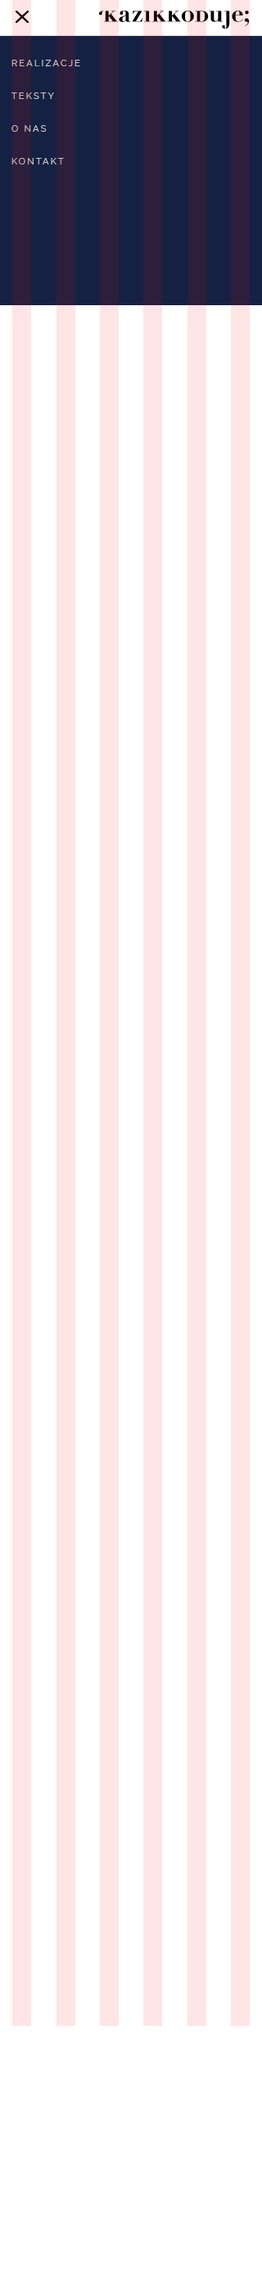
<style>
.page{position:relative;width:262px;height:2291px;background:#ffffff}
.page>*{position:absolute;margin:0}
.t1{font:9px/32.7px "Raleway-Regular";letter-spacing:0.2em;color:#cccccc}
</style>
<div class="page">
<p class="t1" style="left:11px;top:60px;width:69px;height:104px">REALIZACJE<br>TEKSTY<br>O NAS<br>KONTAKT</p>
</div>
